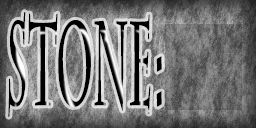
<style>
.page{position:relative;width:256px;height:128px}
.page>*{position:absolute;margin:0}
.t1{font:119px "CharlemagneStd-Bold";color:#000000;scale:0.33 1}
</style>
<div class="page">
<p class="t1" style="left:8px;top:12px;width:154px;height:105px">:Stone</p>
</div>
